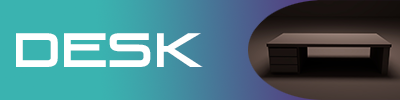
<style>
.page{position:relative;width:400px;height:100px;background:#3ab3b0}
.page>*{position:absolute;margin:0}
.t1{font:45.8px "VenusRising-Regular";color:#ffffff}
</style>
<div class="page">
<p class="t1" style="left:16px;top:33px;width:187px;height:34px">Desk</p>
</div>
